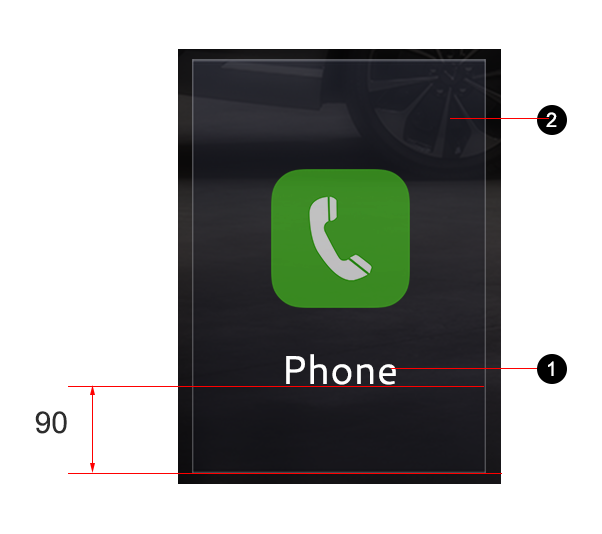
<style>
.page{position:relative;width:602px;height:534px;background:#ffffff}
.page>*{position:absolute;margin:0}
.t1{font:20px "ArialMT";color:#ffffff}
.t2{font:30px "ArialMT";color:#2d2d2d}
</style>
<div class="page">
<p class="t1" style="left:546px;top:112px;width:11px;height:15px">2</p>
<p class="t1" style="left:548px;top:361px;width:6px;height:15px">1</p>
<p class="t2" style="left:35px;top:411px;width:32px;height:23px">90</p>
</div>
